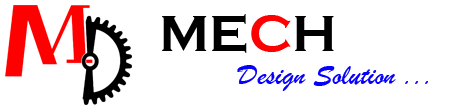
<style>
.page{position:relative;width:460px;height:108px;background:#ffffff}
.page>*{position:absolute;margin:0}
.t1{font:51.7px "CopperplateGothic-Bold";color:#000000}
.t2{font:51.7px "CopperplateGothic-Bold";color:#ff0000}
.t3{font:30px "BrushScriptMT";color:#0600ff}
</style>
<div class="page">
<p class="t1" style="left:162px;top:14px;width:172px;height:39px">ME<span class="t2">C</span>H</p>
<p class="t3" style="left:237px;top:65px;width:191px;height:26px">Design Solution ...</p>
</div>
